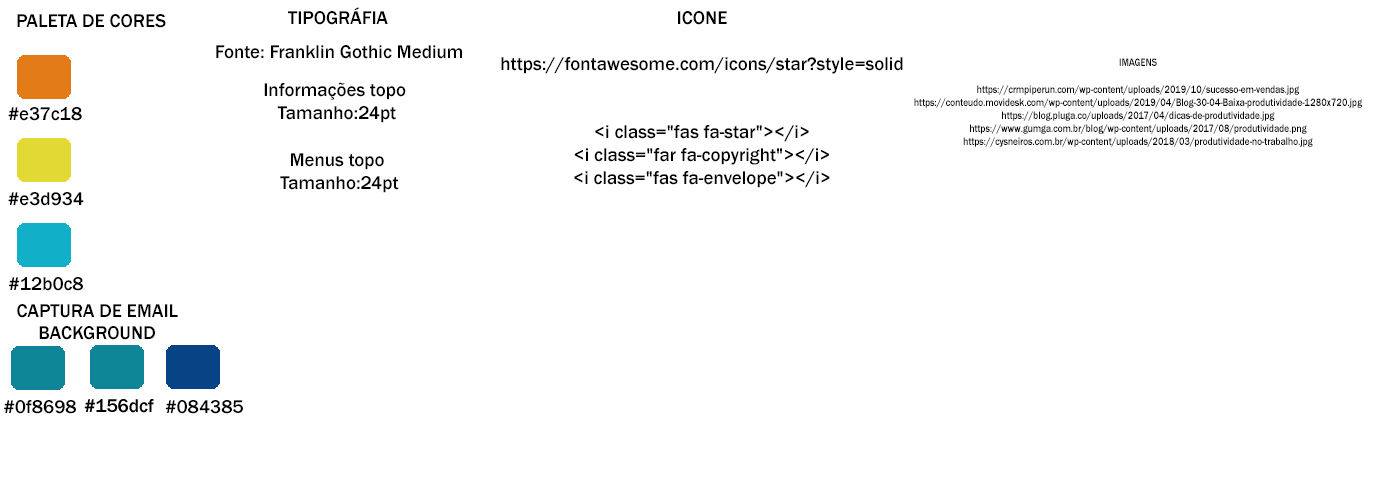
<style>
.page{position:relative;width:1400px;height:500px;background:#ffffff}
.page>*{position:absolute;margin:0}
.t1{font:19px "FranklinGothic-Medium";color:#000000}
.t2{font:11px "FranklinGothic-Medium";color:#000000;scale:0.85 1}
</style>
<div class="page">
<p class="t1" style="left:17px;top:14px;width:149px;height:14px">PALETA DE CORES</p>
<p class="t1" style="left:288px;top:7px;width:100px;height:18px">TIPOGRÁFIA</p>
<p class="t1" style="left:501px;top:11px;width:402px;height:177px;text-align:center">ICONE<br><br>https://fontawesome.com/icons/star?style=solid<br><br><br>&lt;i class="fas fa-star"&gt;&lt;/i&gt;<br>&lt;i class="far fa-copyright"&gt;&lt;/i&gt;<br>&lt;i class="fas fa-envelope"&gt;&lt;/i&gt;</p>
<p class="t1" style="left:216px;top:45px;width:246px;height:14px">Fonte: Franklin Gothic Medium</p>
<p class="t2" style="left:914px;top:58px;width:448px;height:89px;text-align:center">IMAGENS<br><br>https://crmpiperun.com/wp-content/uploads/2019/10/sucesso-em-vendas.jpg<br>https://conteudo.movidesk.com/wp-content/uploads/2019/04/Blog-30-04-Baixa-produtividade-1280x720.jpg<br>https://blog.pluga.co/uploads/2017/04/dicas-de-produtividade.jpg<br>https://www.gumga.com.br/blog/wp-content/uploads/2017/08/produtividade.png<br>https://cysneiros.com.br/wp-content/uploads/2018/03/produtividade-no-trabalho.jpg</p>
<p class="t1" style="left:264px;top:82px;width:142px;height:41px;text-align:center">Informações topo <br>Tamanho:24pt</p>
<p class="t1" style="left:8px;top:107px;width:74px;height:14px">#e37c18</p>
<p class="t1" style="left:280px;top:153px;width:119px;height:40px;text-align:center">Menus topo<br> Tamanho:24pt</p>
<p class="t1" style="left:8px;top:192px;width:76px;height:14px">#e3d934</p>
<p class="t1" style="left:9px;top:277px;width:74px;height:14px">#12b0c8</p>
<p class="t1" style="left:17px;top:304px;width:161px;height:14px">CAPTURA DE EMAIL</p>
<p class="t1" style="left:39px;top:326px;width:116px;height:14px">BACKGROUND</p>
<p class="t1" style="left:4px;top:400px;width:72px;height:14px">#0f8698</p>
<p class="t1" style="left:165px;top:400px;width:78px;height:14px">#084385</p>
</div>
